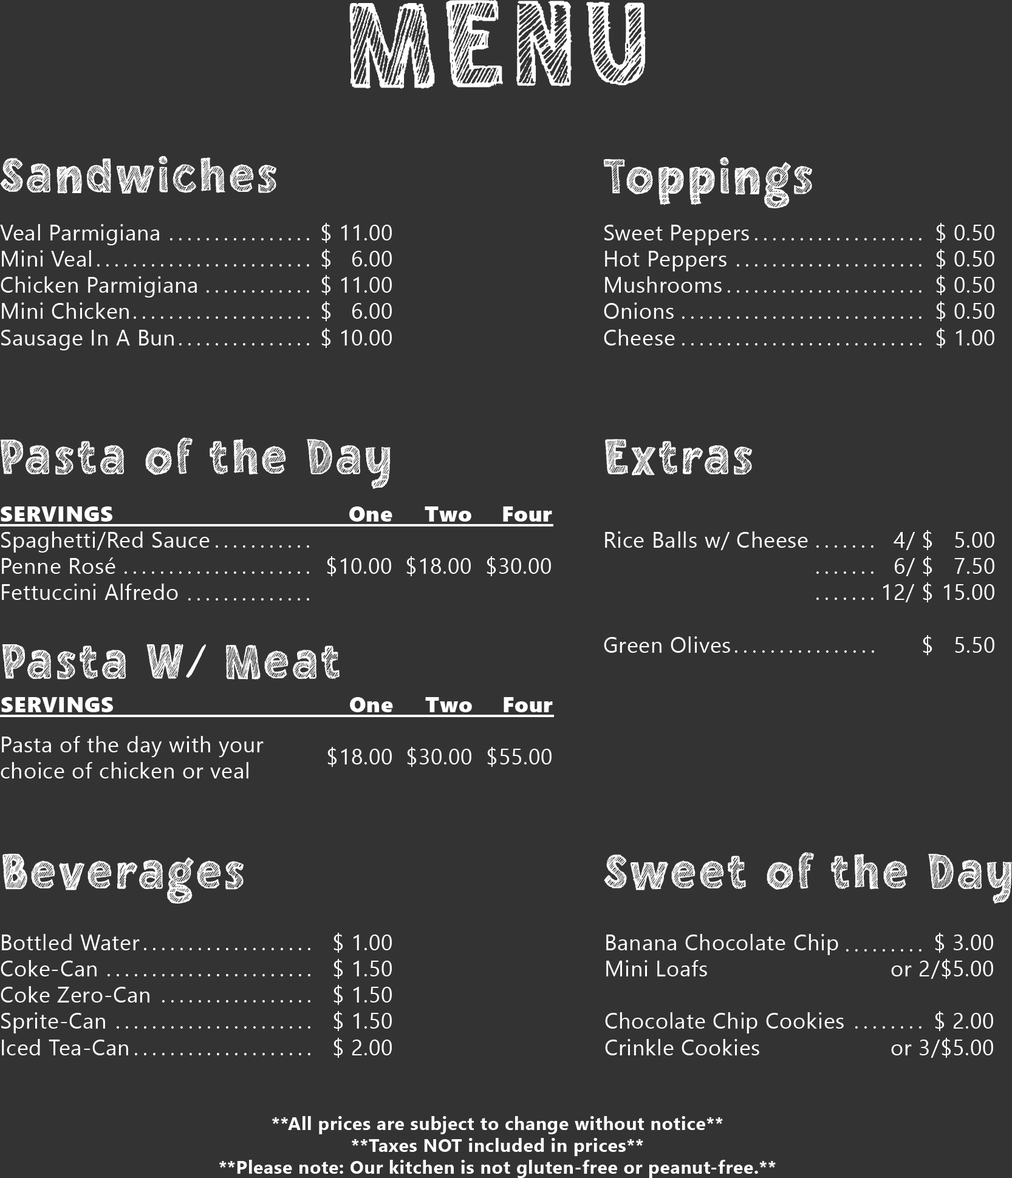
<style>
.page{position:relative;width:1012px;height:1178px;background:#333333}
.page>*{position:absolute;margin:0}
.t1{font:151.9px "Chalkboy-Regular";letter-spacing:0.025em;color:#ffffff}
.t2{font:60.7px "Chalkboy-Regular";letter-spacing:0.025em;color:#ffffff}
.t3{font:21.9px "SegoeUI";letter-spacing:0.025em;color:#ffffff}
.t4{font:21.9px "SegoeUI";letter-spacing:0.2em;color:#ffffff}
.t5{font:21.9px "SegoeUIBlack";letter-spacing:0.025em;color:#ffffff}
.t6{font:48.6px "aApeMount";letter-spacing:0.025em;color:#ffffff}
.t7{font:18.2px "SegoeUI-Bold";letter-spacing:0.025em;color:#ffffff}
</style>
<div class="page">
<p class="t1" style="left:349px;top:0px;width:297px;height:89px">MENU</p>
<p class="t2" style="left:0px;top:156px;width:276px;height:38px">Sandwiches</p>
<p class="t2" style="left:603px;top:157px;width:209px;height:51px">Toppings</p>
<p class="t3" style="left:0px;top:224px;width:197px;height:126px">Veal Parmigiana<br>Mini Veal<br>Chicken Parmigiana<br>Mini Chicken<br>Sausage In A Bun</p>
<p class="t3" style="left:321px;top:223px;width:71px;height:125px;text-align:right">$ 11.00<br>$ 6.00<br>$ 11.00<br>$ 6.00<br>$ 10.00</p>
<p class="t3" style="left:604px;top:225px;width:145px;height:121px">Sweet Peppers<br>Hot Peppers<br>Mushrooms<br>Onions<br>Cheese</p>
<p class="t3" style="left:936px;top:223px;width:58px;height:125px;text-align:right">$ 0.50<br>$ 0.50<br>$ 0.50<br>$ 0.50<br>$ 1.00</p>
<p class="t4" style="left:170px;top:238px;width:139px;height:3px">................</p>
<p class="t4" style="left:755px;top:238px;width:166px;height:3px">...................</p>
<p class="t4" style="left:97px;top:264px;width:212px;height:3px">........................</p>
<p class="t4" style="left:737px;top:264px;width:184px;height:3px">.....................</p>
<p class="t4" style="left:207px;top:290px;width:102px;height:3px">............</p>
<p class="t4" style="left:728px;top:290px;width:193px;height:3px">......................</p>
<p class="t4" style="left:134px;top:316px;width:175px;height:3px">....................</p>
<p class="t4" style="left:682px;top:316px;width:239px;height:3px">...........................</p>
<p class="t4" style="left:179px;top:343px;width:130px;height:3px">...............</p>
<p class="t4" style="left:682px;top:343px;width:239px;height:3px">...........................</p>
<p class="t2" style="left:0px;top:437px;width:391px;height:52px">Pasta of the Day</p>
<p class="t2" style="left:605px;top:439px;width:147px;height:37px">Extras</p>
<p class="t5" style="left:1px;top:507px;width:111px;height:15px">SERVINGS</p>
<p class="t3" style="left:327px;top:507px;width:65px;height:69px;text-align:right"><span class="t5">One<br></span><br>$10.00</p>
<p class="t3" style="left:406px;top:507px;width:65px;height:69px;text-align:right"><span class="t5">Two<br></span><br>$18.00</p>
<p class="t3" style="left:487px;top:507px;width:65px;height:69px;text-align:right"><span class="t5">Four<br></span><br>$30.00</p>
<p class="t3" style="left:1px;top:531px;width:209px;height:69px">Spaghetti/Red Sauce<br>Penne Rosé<br>Fettuccini Alfredo</p>
<p class="t3" style="left:604px;top:531px;width:204px;height:122px">Rice Balls w/ Cheese<br><br><br><br>Green Olives</p>
<p class="t3" style="left:883px;top:530px;width:111px;height:125px;text-align:right">4/ $   5.00<br>6/ $   7.50<br>12/ $ 15.00<br><br>$ 5.50</p>
<p class="t4" style="left:216px;top:545px;width:93px;height:3px">...........</p>
<p class="t4" style="left:816px;top:545px;width:57px;height:3px">.......</p>
<p class="t4" style="left:125px;top:572px;width:184px;height:2px">.....................</p>
<p class="t4" style="left:816px;top:572px;width:57px;height:2px">.......</p>
<p class="t4" style="left:188px;top:598px;width:121px;height:3px">..............</p>
<p class="t4" style="left:816px;top:598px;width:57px;height:2px">.......</p>
<p class="t2" style="left:2px;top:644px;width:338px;height:36px">Pasta W<span class="t6">/</span> Meat</p>
<p class="t4" style="left:735px;top:651px;width:139px;height:2px">................</p>
<p class="t5" style="left:1px;top:697px;width:112px;height:15px">SERVINGS</p>
<p class="t3" style="left:327px;top:697px;width:66px;height:70px;text-align:right"><span class="t5">One<br></span><br>$18.00</p>
<p class="t3" style="left:407px;top:697px;width:65px;height:70px;text-align:right"><span class="t5">Two<br></span><br>$30.00</p>
<p class="t3" style="left:487px;top:697px;width:66px;height:70px;text-align:right"><span class="t5">Four<br></span><br>$55.00</p>
<p class="t3" style="left:1px;top:736px;width:263px;height:43px">Pasta of the day with your<br>choice of chicken or veal</p>
<p class="t2" style="left:2px;top:854px;width:242px;height:50px">Beverages</p>
<p class="t2" style="left:604px;top:852px;width:408px;height:52px">Sweet of the Day</p>
<p class="t3" style="left:1px;top:934px;width:148px;height:122px">Bottled Water<br>Coke-Can<br>Coke Zero-Can<br>Sprite-Can<br>Iced Tea-Can</p>
<p class="t3" style="left:333px;top:933px;width:59px;height:125px;text-align:right">$ 1.00<br>$ 1.50<br>$ 1.50<br>$ 1.50<br>$ 2.00</p>
<p class="t3" style="left:605px;top:934px;width:239px;height:122px">Banana Chocolate Chip<br>Mini Loafs<br><br>Chocolate Chip Cookies<br>Crinkle Cookies</p>
<p class="t3" style="left:891px;top:933px;width:102px;height:125px;text-align:right">$ 3.00<br>or 2/$5.00<br><br>$ 2.00<br>or 3/$5.00</p>
<p class="t4" style="left:144px;top:948px;width:166px;height:3px">...................</p>
<p class="t4" style="left:846px;top:949px;width:75px;height:3px">.........</p>
<p class="t4" style="left:108px;top:974px;width:202px;height:3px">.......................</p>
<p class="t4" style="left:162px;top:1000px;width:148px;height:3px">.................</p>
<p class="t4" style="left:117px;top:1027px;width:193px;height:2px">......................</p>
<p class="t4" style="left:855px;top:1027px;width:66px;height:2px">........</p>
<p class="t4" style="left:135px;top:1053px;width:175px;height:3px">....................</p>
<p class="t7" style="left:219px;top:1116px;width:557px;height:62px;text-align:center">**All prices are subject to change without notice**<br>**Taxes NOT included in prices**<br>**Please note: Our kitchen is not gluten-free or peanut-free.**</p>
</div>
